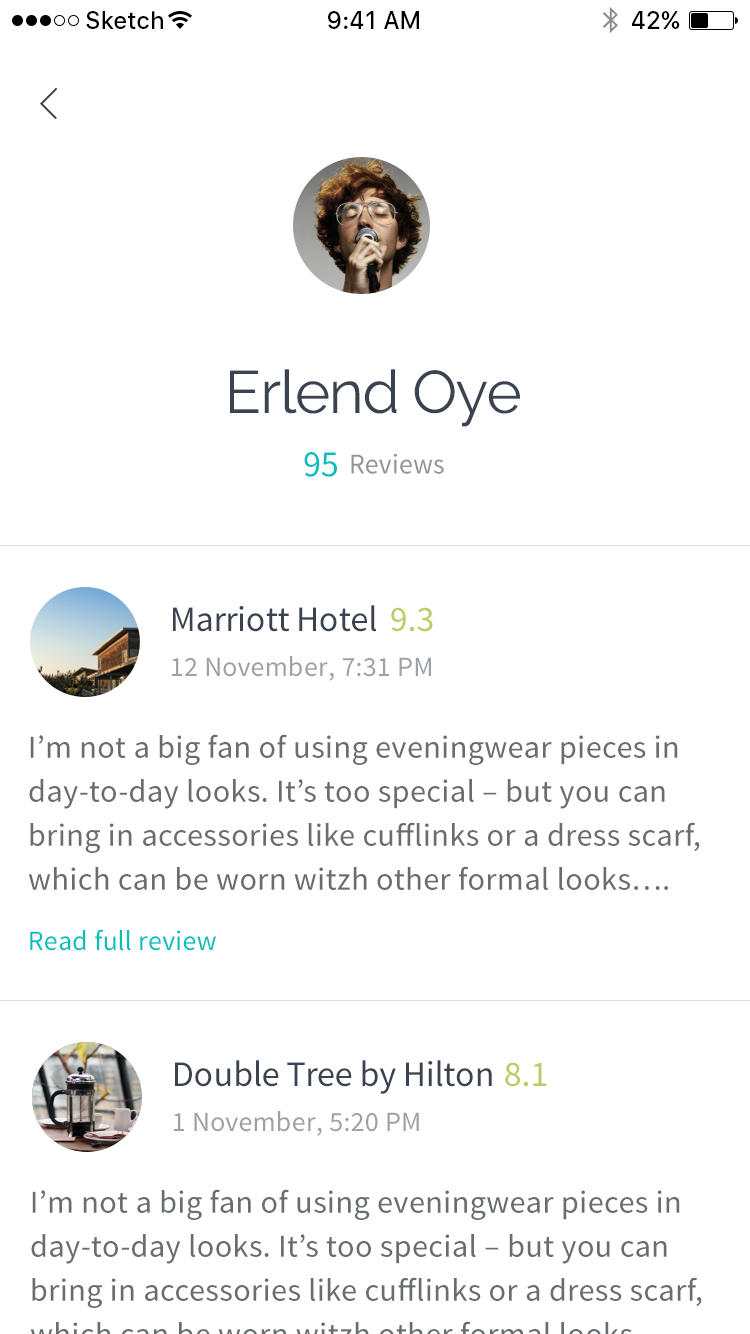
<style>
.page{position:relative;width:750px;height:1334px;background:#ffffff}
.page>*{position:absolute;margin:0}
.t1{font:24px "SFUIText-Medium";color:#000000}
.t2{font:60px "Raleway";letter-spacing:-0.02em;color:#3c4350}
.t3{font:37.1px "SourceSansPro-Regular";letter-spacing:-0.005em;color:#06bebd}
.t4{font:28.4px "SourceSansPro-Regular";letter-spacing:0.005em;color:#919499}
.t5{font:36px "SourceSansPro-Regular";letter-spacing:-0.005em;color:#3c4350}
.t6{font:36px "SourceSansPro-Regular";letter-spacing:-0.005em;color:#b7ce63}
.t7{font:28px "SourceSansPro-Regular";letter-spacing:0.005em;color:#9da1a7}
.t8{font:32px/44px "SourceSansPro-Regular";letter-spacing:0.015em;color:#696d6f}
.t9{font:28px "SourceSansPro-Regular";letter-spacing:0.005em;color:#06bebd}
</style>
<div class="page">
<p class="t1" style="left:86px;top:11px;width:77px;height:18px">Sketch</p>
<p class="t1" style="left:328px;top:11px;width:91px;height:18px">9:41 AM</p>
<p class="t1" style="left:632px;top:11px;width:48px;height:18px">42%</p>
<p class="t2" style="left:230px;top:369px;width:290px;height:58px">Erlend Oye</p>
<p class="t3" style="left:304px;top:452px;width:33px;height:25px">95</p>
<p class="t4" style="left:351px;top:453px;width:93px;height:21px">Reviews</p>
<p class="t5" style="left:173px;top:605px;width:203px;height:27px">Marriott Hotel</p>
<p class="t6" style="left:391px;top:607px;width:42px;height:25px">9.3</p>
<p class="t7" style="left:172px;top:656px;width:259px;height:25px">12 November, 7:31 PM</p>
<p class="t8" style="left:28px;top:734px;width:672px;height:156px">I’m not a big fan of using eveningwear pieces in day-to-day looks. It’s too special – but you can bring in accessories like cufflinks or a dress scarf, which can be worn witzh other formal looks….</p>
<p class="t9" style="left:30px;top:929px;width:186px;height:22px">Read full review</p>
<p class="t5" style="left:175px;top:1060px;width:317px;height:34px">Double Tree by Hilton</p>
<p class="t6" style="left:505px;top:1062px;width:42px;height:25px">8.1</p>
<p class="t7" style="left:174px;top:1111px;width:245px;height:25px">1 November, 5:20 PM</p>
</div>
